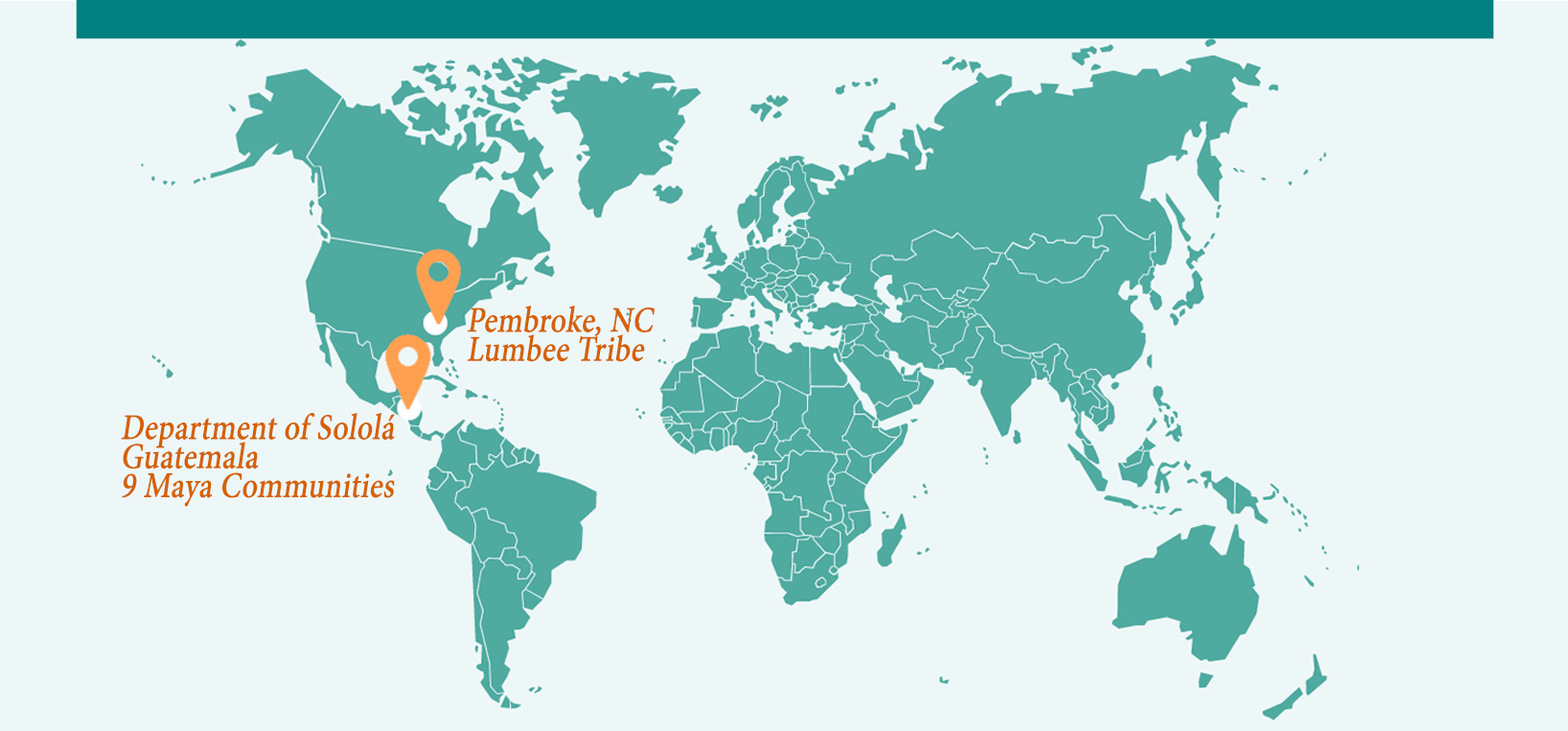
<style>
.page{position:relative;width:1568px;height:731px;background:#eef7f8}
.page>*{position:absolute;margin:0}
.t1{font:36.2px/3.4px "MinionPro-Medium";letter-spacing:-0.01em;color:#d56100;font-weight:bold;font-style:italic;scale:0.84 1}
</style>
<div class="page">
<p class="t1" style="left:467px;top:306px;width:188px;height:56px">Pembroke, NC<br>Lumbee Tribe</p>
<p class="t1" style="left:121px;top:413px;width:274px;height:94px">Department of Sololá <br>Guatemala<br>9 Maya Communities</p>
</div>
